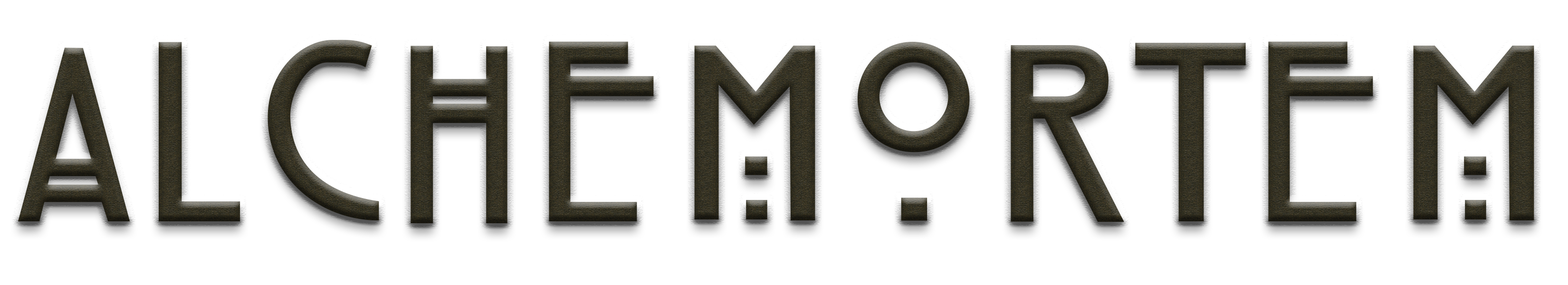
<style>
.page{position:relative;width:1568px;height:285px;background:#ffffff}
.page>*{position:absolute;margin:0}
.t1{font:235px "HillHouse";color:#333020}
</style>
<div class="page">
<p class="t1" style="left:18px;top:39px;width:1516px;height:184px">Alchemortem</p>
</div>
